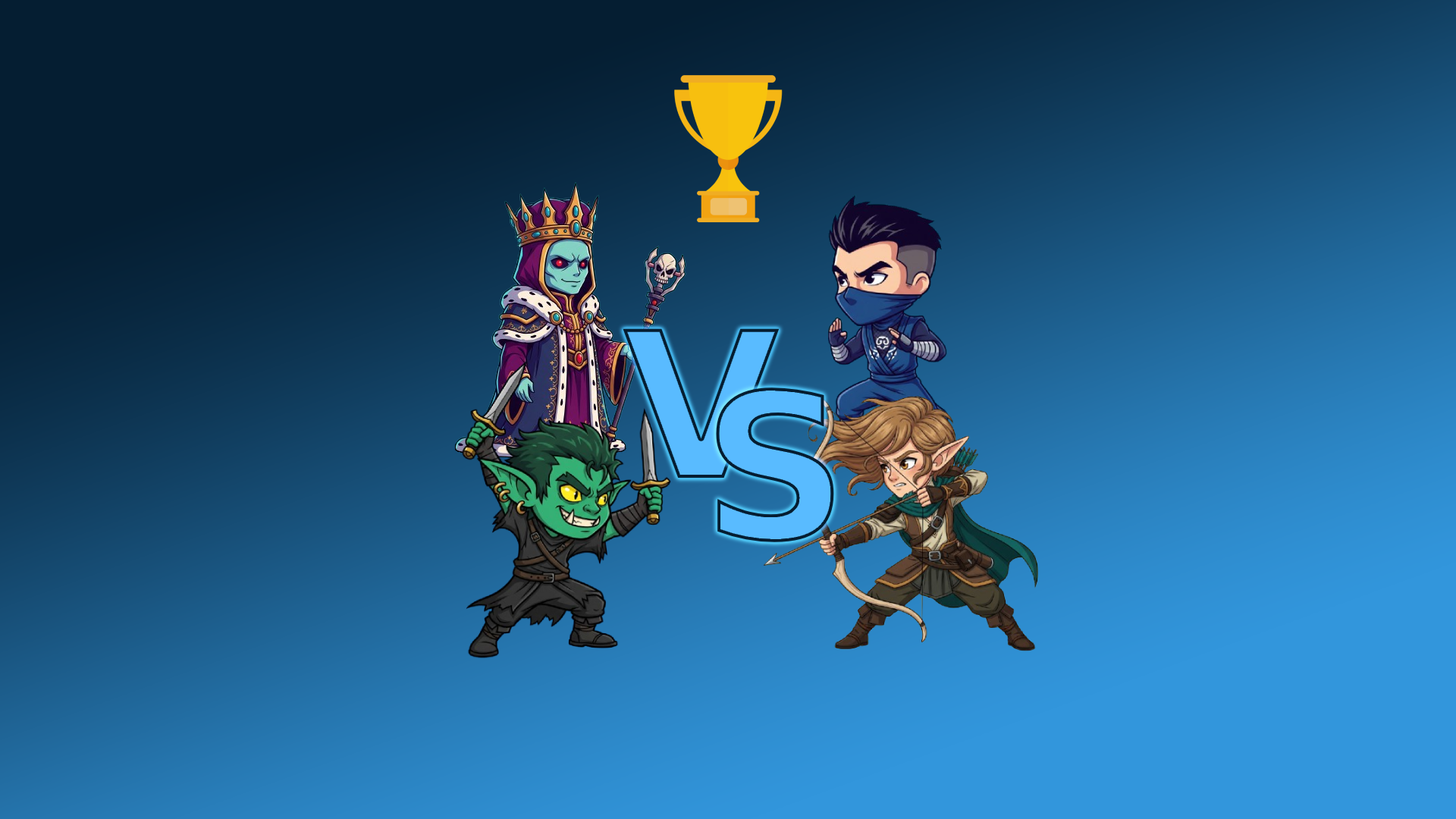
<style>
.page{position:relative;width:1456px;height:819px}
.page>*{position:absolute;margin:0}
.t1{font:204.1px "Arial-Black";letter-spacing:0.15em;color:#59bbff}
</style>
<div class="page">
<p class="t1" style="left:623px;top:328px;width:157px;height:150px">V</p>
</div>
